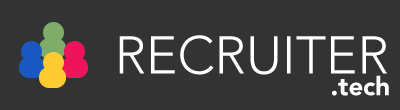
<style>
.page{position:relative;width:400px;height:110px;background:#333333}
.page>*{position:absolute;margin:0}
.t1{font:52.8px "Avenir-Light";color:#ffffff}
.t2{font:25.5px "Avenir-Black";color:#ffffff}
</style>
<div class="page">
<p class="t1" style="left:119px;top:35px;width:268px;height:40px">RECRUITER</p>
<p class="t2" style="left:332px;top:75px;width:57px;height:21px">.tech</p>
</div>
